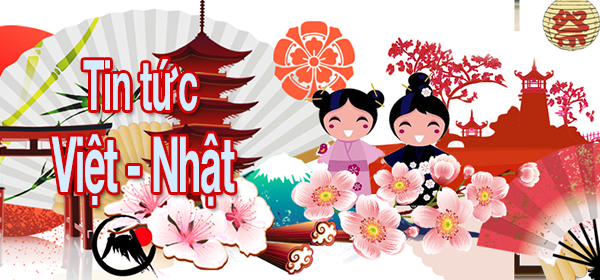
<style>
.page{position:relative;width:600px;height:280px;background:#ffffff}
.page>*{position:absolute;margin:0}
.t1{font:69.7px "HelveticaNeue-Bold";letter-spacing:-0.03em;color:#d3ecff;scale:0.5 1}
.t2{font:77.6px "HelveticaNeue-Bold";letter-spacing:-0.03em;color:#d3ecff;scale:0.5 1}
</style>
<div class="page">
<p class="t1" style="left:83px;top:59px;width:115px;height:52px">Tin tức</p>
<p class="t2" style="left:51px;top:133px;width:184px;height:73px">Việt - Nhật</p>
</div>
